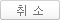
<style>
.page{position:relative;width:60px;height:20px;background:#ffffff}
.page>*{position:absolute;margin:0}
.t1{font:12px "Dotum";color:#757575}
</style>
<div class="page">
<p class="t1" style="left:17px;top:5px;width:26px;height:11px">취 소</p>
</div>
